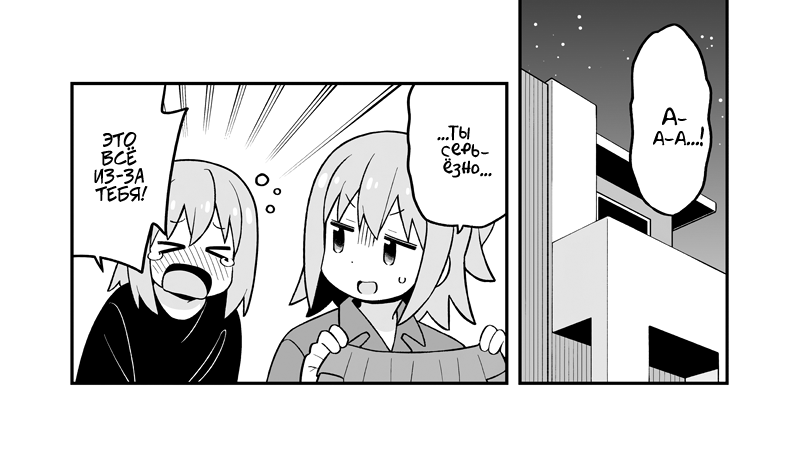
<style>
.page{position:relative;width:800px;height:456px;background:#ffffff}
.page>*{position:absolute;margin:0}
.t1{font:20px "AkbarPlain";color:#000000}
.t2{font:18px "AkbarPlain";color:#000000}
.t3{font:18px "v_CCJeffCampbell";color:#000000;text-transform:uppercase}
</style>
<div class="page">
<p class="t1" style="left:653px;top:107px;width:51px;height:40px;text-align:center">А-<br>а-а...!</p>
<p class="t2" style="left:437px;top:125px;width:55px;height:53px;text-align:center">...Ты <br>серь-<br>ёзно...</p>
<p class="t3" style="left:94px;top:132px;width:54px;height:70px;text-align:center">это<br>всё<br>из-за<br>тебя!</p>
</div>
